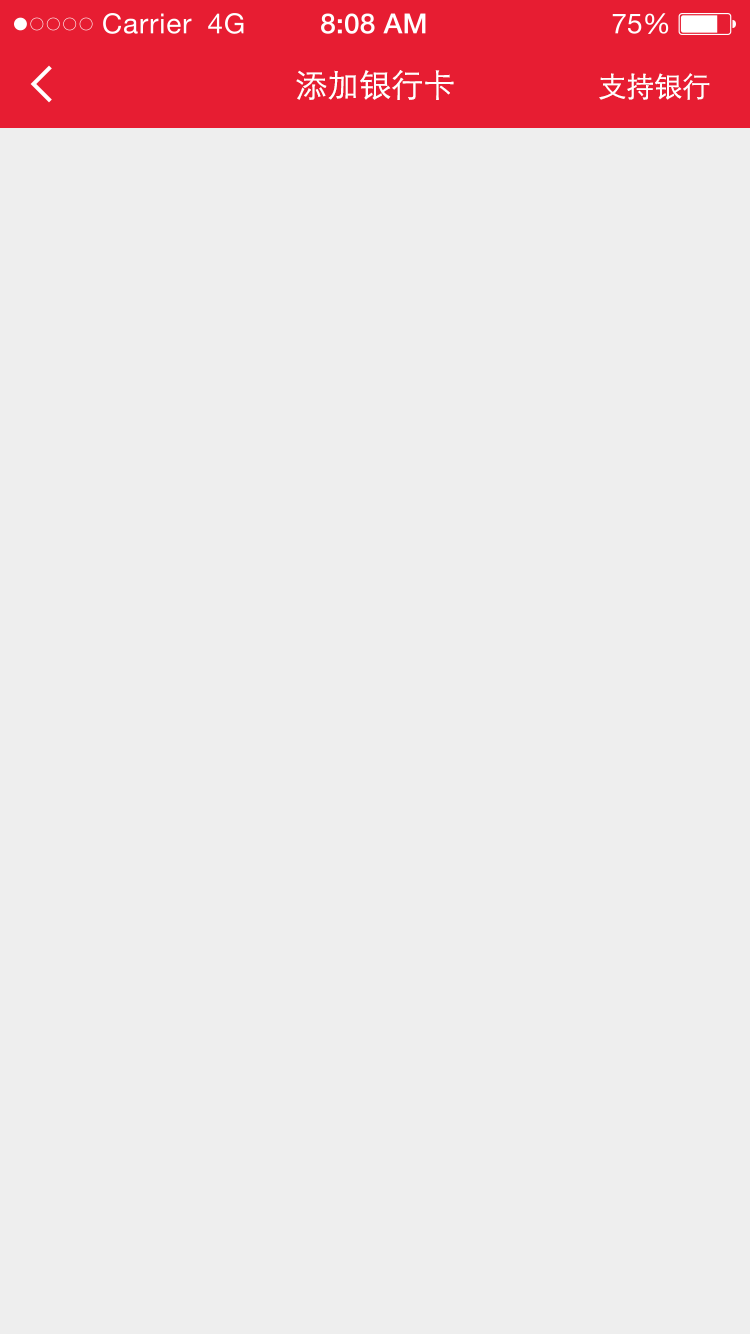
<style>
.page{position:relative;width:750px;height:1334px;background:#eeeeee}
.page>*{position:absolute;margin:0}
.t1{font:32px "STXihei";color:#ffffff}
.t2{font:28px "STXihei";color:#ffffff}
</style>
<div class="page">
<p class="t1" style="left:296px;top:70px;width:158px;height:30px">添加银行卡</p>
<p class="t2" style="left:599px;top:73px;width:111px;height:27px">支持银行</p>
</div>
